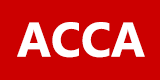
<style>
.page{position:relative;width:160px;height:80px;background:#cc0000}
.page>*{position:absolute;margin:0}
.t1{font:48.3px "MicrosoftPhagsPa-Bold";color:#ffffff}
</style>
<div class="page">
<p class="t1" style="left:17px;top:22px;width:128px;height:36px">ACCA</p>
</div>
